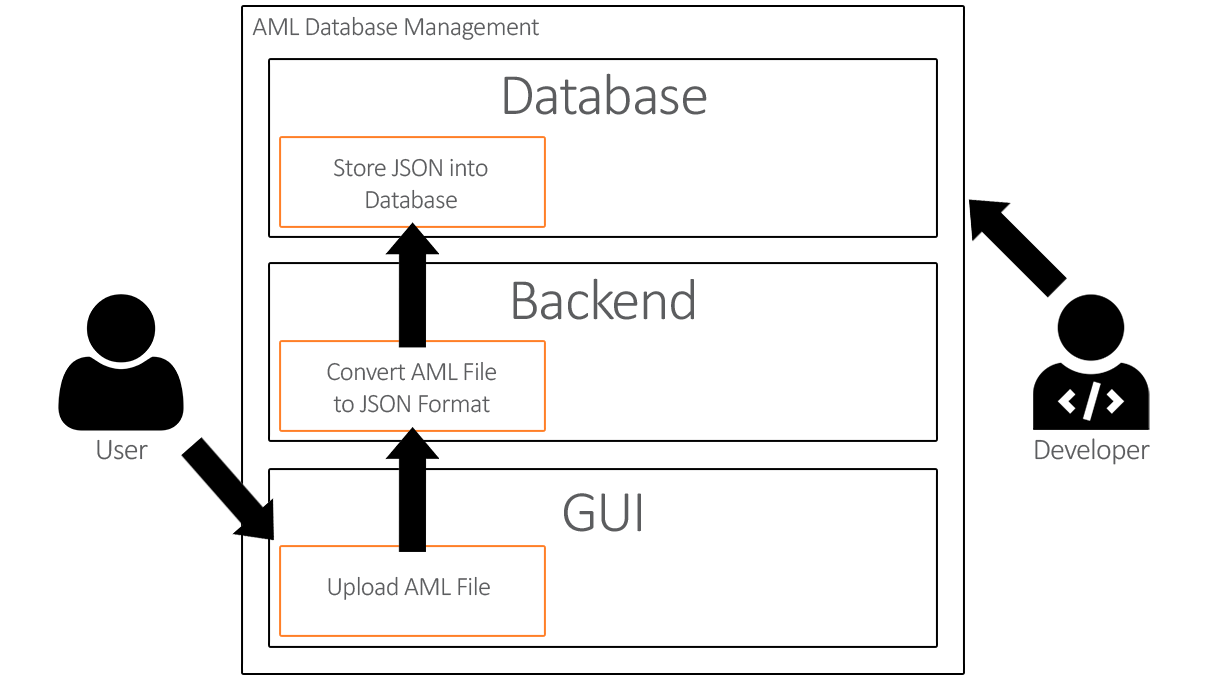
<style>
.page{position:relative;width:1206px;height:684px;background:#ffffff}
.page>*{position:absolute;margin:0}
.t1{font:26.4px "Calibri-Light";letter-spacing:-0.025em;color:#5c5d5f}
.t2{font:59.1px "Calibri-Light";letter-spacing:-0.025em;color:#5c5d5f}
.t3{font:30px "Calibri-Light";letter-spacing:-0.025em;color:#5c5d5f}
</style>
<div class="page">
<p class="t1" style="left:252px;top:16px;width:287px;height:24px">AML Database Management</p>
<p class="t2" style="left:504px;top:73px;width:203px;height:42px">Database</p>
<p class="t1" style="left:334px;top:158px;width:154px;height:51px;text-align:center">Store JSON into<br>Database</p>
<p class="t2" style="left:513px;top:278px;width:181px;height:42px">Backend</p>
<p class="t1" style="left:327px;top:362px;width:170px;height:51px;text-align:center">Convert AML File<br>to JSON Format</p>
<p class="t3" style="left:1035px;top:438px;width:115px;height:27px">Developer</p>
<p class="t3" style="left:97px;top:439px;width:51px;height:21px">User</p>
<p class="t2" style="left:564px;top:493px;width:77px;height:39px">GUI</p>
<p class="t1" style="left:328px;top:576px;width:162px;height:24px">Upload AML File</p>
</div>
